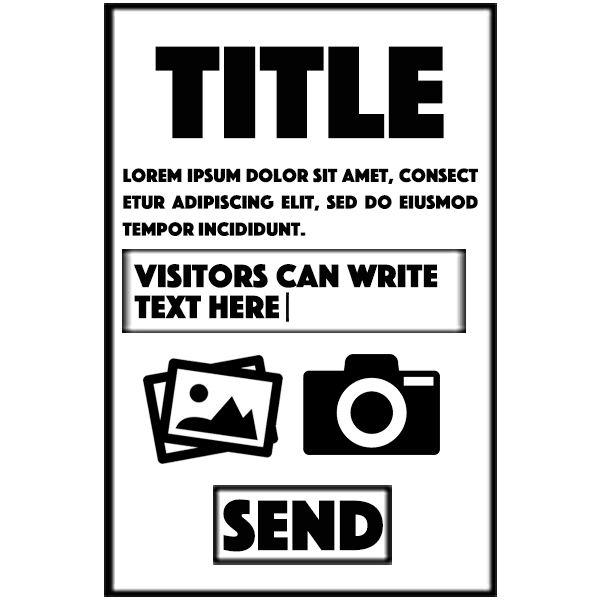
<style>
.page{position:relative;width:600px;height:600px;background:#ffffff}
.page>*{position:absolute;margin:0}
.t1{font:137.3px "Phosphate-Solid";color:#020202}
.t2{font:20px/26.9px "Phosphate-Solid";color:#020202}
.t3{font:34px "Phosphate-Solid";color:#020202}
.t4{font:74.5px "Phosphate-Solid";color:#020202}
</style>
<div class="page">
<p class="t1" style="left:155px;top:46px;width:289px;height:93px">TITLE</p>
<p class="t2" style="left:122px;top:168px;width:356px;height:68px;text-align:justify">Lorem ipsum dolor sit amet, consect etur adipiscing elit, sed do eiusmod tempor incididunt.</p>
<p class="t3" style="left:133px;top:264px;width:305px;height:55px">visitors can write text here</p>
<p class="t4" style="left:223px;top:499px;width:160px;height:53px">SEND</p>
</div>
